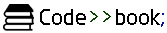
<style>
.page{position:relative;width:167px;height:33px;background:#ffffff}
.page>*{position:absolute;margin:0}
.t1{font:21.9px "NeoSans";color:#000000}
.t2{font:21.9px "NeoSans";color:#084002}
.t3{font:21.9px "NeoSans";color:#0b1290}
</style>
<div class="page">
<p class="t1" style="left:40px;top:9px;width:124px;height:18px">Code<span class="t2">&gt;&gt;</span>book<span class="t3">;</span></p>
</div>
